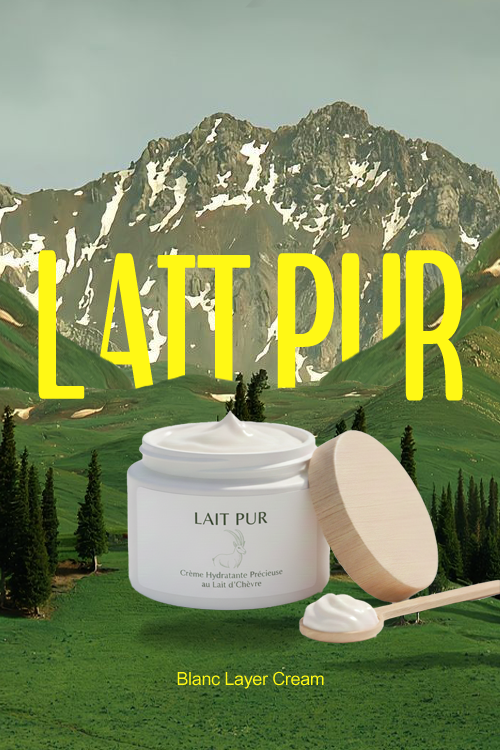
<style>
.page{position:relative;width:500px;height:750px}
.page>*{position:absolute;margin:0}
.t1{font:180px "TTTtangsbudaejjigaeM";letter-spacing:-0.02em;color:#fff815;scale:0.47 1}
.t2{font:18px "ArialUnicodeMS";letter-spacing:-0.02em;color:#fff815}
</style>
<div class="page">
<p class="t1" style="left:38px;top:250px;width:425px;height:151px">L               R</p>
<p class="t1" style="left:93px;top:253px;width:308px;height:154px">AIT PU</p>
<p class="t2" style="left:177px;top:671px;width:147px;height:18px">Blanc Layer Cream</p>
</div>
